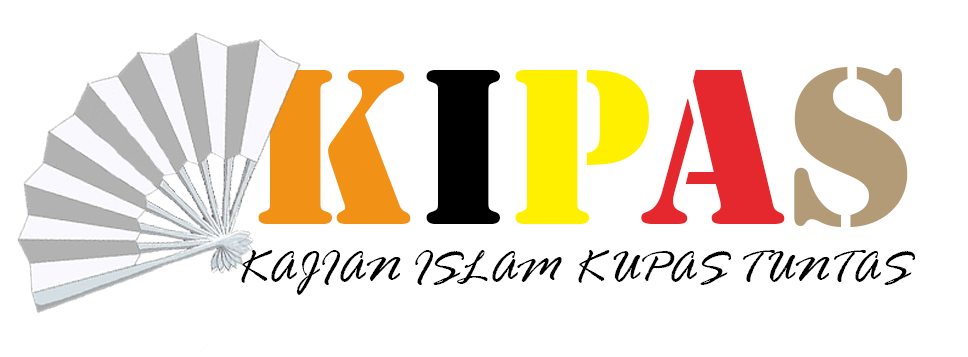
<style>
.page{position:relative;width:968px;height:357px;background:#ffffff}
.page>*{position:absolute;margin:0}
.t1{font:205.7px "StencilStd";color:#f19216;text-transform:uppercase}
.t2{font:205.7px "StencilStd";color:#000000;text-transform:uppercase}
.t3{font:205.7px "StencilStd";color:#fff000;text-transform:uppercase}
.t4{font:205.7px "StencilStd";color:#e4282d;text-transform:uppercase}
.t5{font:205.7px "StencilStd";color:#b39b77;text-transform:uppercase}
.t6{font:47.1px "RageItalic";color:#000000;text-transform:uppercase}
</style>
<div class="page">
<p class="t1" style="left:258px;top:67px;width:650px;height:160px">K<span class="t2">I</span><span class="t3">P</span><span class="t4">A</span><span class="t5">S</span></p>
<p class="t6" style="left:241px;top:250px;width:674px;height:45px">KAJIAN ISLAM KuPAS TUNTAS</p>
</div>
